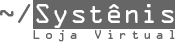
<style>
.page{position:relative;width:175px;height:42px;background:#666666}
.page>*{position:absolute;margin:0}
.t1{font:24.8px "OCRAStd";color:#ffffff}
.t2{font:24.8px "OCRAStd";color:#666666}
.t3{font:11.4px "OCRAStd";letter-spacing:0.36em;color:#666666}
</style>
<div class="page">
<p class="t1" style="left:0px;top:4px;width:174px;height:24px"><span class="t2">~/</span>Systênis</p>
<p class="t3" style="left:33px;top:30px;width:142px;height:12px">Loja Virtual</p>
</div>
